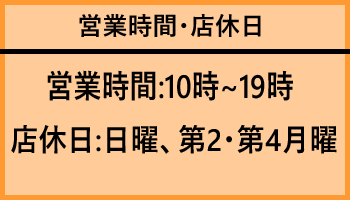
<style>
.page{position:relative;width:350px;height:200px;background:#ffcc99}
.page>*{position:absolute;margin:0}
.t1{font:25px "YuGothicUI-Semibold";color:#000000}
.t2{font:32.6px "YuGothicUI-Semibold";color:#000000;scale:0.86 1}
.t3{font:30.9px "YuGothicUI-Semibold";color:#000000;scale:0.92 1}
</style>
<div class="page">
<p class="t1" style="left:79px;top:14px;width:182px;height:23px">営業時間・店休日</p>
<p class="t2" style="left:47px;top:70px;width:246px;height:31px">営業時間:10時~19時</p>
<p class="t3" style="left:11px;top:125px;width:326px;height:29px">店休日:日曜、第2・第4月曜</p>
</div>
